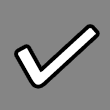
<style>
.page{position:relative;width:110px;height:110px;background:#858585}
.page>*{position:absolute;margin:0}
.t1{font:81.7px "CTBiaoSongSF";color:#ffffff;font-weight:bold}
</style>
<div class="page">
<p class="t1" style="left:18px;top:28px;width:78px;height:57px;rotate:10deg">√</p>
</div>
